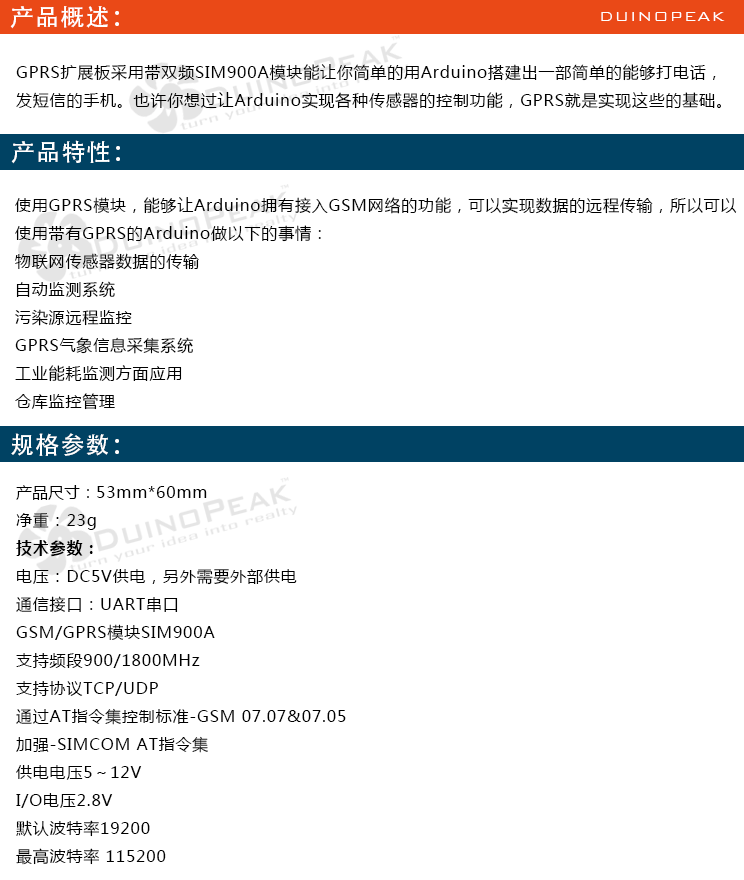
<style>
.page{position:relative;width:744px;height:880px;background:#ffffff}
.page>*{position:absolute;margin:0}
.t1{font:24px "AdobeHeitiStd-Regular";letter-spacing:0.05em;color:#ffffff}
.t2{font:18px "BankGothicBT-Light";letter-spacing:0.05em;color:#ffffff}
.t3{font:16px "MicrosoftYaHei";letter-spacing:0.05em;color:#000000}
.t4{font:16px "MicrosoftYaHei";color:#000000}
.t5{font:16px "MicrosoftYaHei-Bold";letter-spacing:0.05em;color:#000000}
</style>
<div class="page">
<p class="t1" style="left:10px;top:6px;width:109px;height:23px">产品概述：</p>
<p class="t2" style="left:601px;top:12px;width:124px;height:9px">DUINOPEAK</p>
<p class="t3" style="left:16px;top:64px;width:705px;height:45px">GPRS扩展板采用带双频SIM900A模块能让你简单的用Arduino搭建出一部简单的能够打电话，<br>发短信的手机。也许你想过让Arduino实现各种传感器的控制功能，GPRS就是实现这些的基础。</p>
<p class="t1" style="left:11px;top:140px;width:109px;height:24px">产品特性：</p>
<p class="t3" style="left:15px;top:197px;width:722px;height:213px">使用GPRS模块，能够让Arduino拥有接入GSM网络的功能，可以实现数据的远程传输，所以可以<br>使用带有GPRS的Arduino做以下的事情：<br>物联网传感器数据的传输<br>自动监测系统<br>污染源远程监控<br>GPRS气象信息采集系统<br>工业能耗监测方面应用<br>仓库监控管理</p>
<p class="t1" style="left:11px;top:433px;width:108px;height:23px">规格参数：</p>
<p class="t3" style="left:16px;top:485px;width:330px;height:380px"><span class="t4">产品尺寸：</span>53mm*60mm<br>净重：23g<br><span class="t5">技术参数：<br></span>电压：DC5V供电，另外需要外部供电<br>通信接口：UART串口<br>GSM/GPRS模块SIM900A<br>支持频段900/1800MHz<br>支持协议TCP/UDP<br>通过AT指令集控制标准-GSM 07.07&amp;07.05<br>加强-SIMCOM AT指令集<br>供电电压5～12V<br>I/O电压2.8V<br>默认波特率19200<br>最高波特率 115200</p>
</div>
